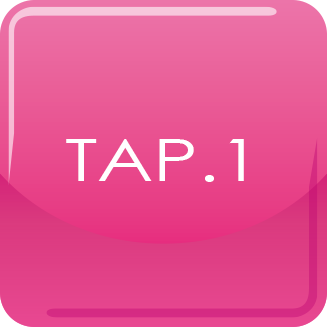
<style>
.page{position:relative;width:327px;height:327px}
.page>*{position:absolute;margin:0}
.t1{font:58.3px "CenturyGothic";color:#ffffff;scale:1.3 1}
</style>
<div class="page">
<p class="t1" style="left:66px;top:139px;width:178px;height:43px">TAP.1</p>
</div>
